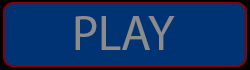
<style>
.page{position:relative;width:250px;height:70px;background:#003374}
.page>*{position:absolute;margin:0}
.t1{font:49.5px "MyriadPro-Regular";color:#8c8c8c}
</style>
<div class="page">
<p class="t1" style="left:75px;top:16px;width:100px;height:34px">PLAY</p>
</div>
